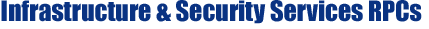
<style>
.page{position:relative;width:429px;height:29px;background:#ffffff}
.page>*{position:absolute;margin:0}
.t1{font:26px "Impact";color:#093282}
</style>
<div class="page">
<p class="t1" style="left:1px;top:0px;width:421px;height:24px">Infrastructure &amp; Security Services RPCs</p>
</div>
